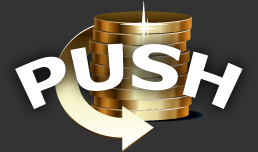
<style>
.page{position:relative;width:258px;height:152px;background:#333333}
.page>*{position:absolute;margin:0}
.t1{font:60px "Verdana-Bold";color:#ffffff}
</style>
<div class="page">
<p class="t1" style="left:15px;top:43px;width:228px;height:66px">PUSH</p>
</div>
